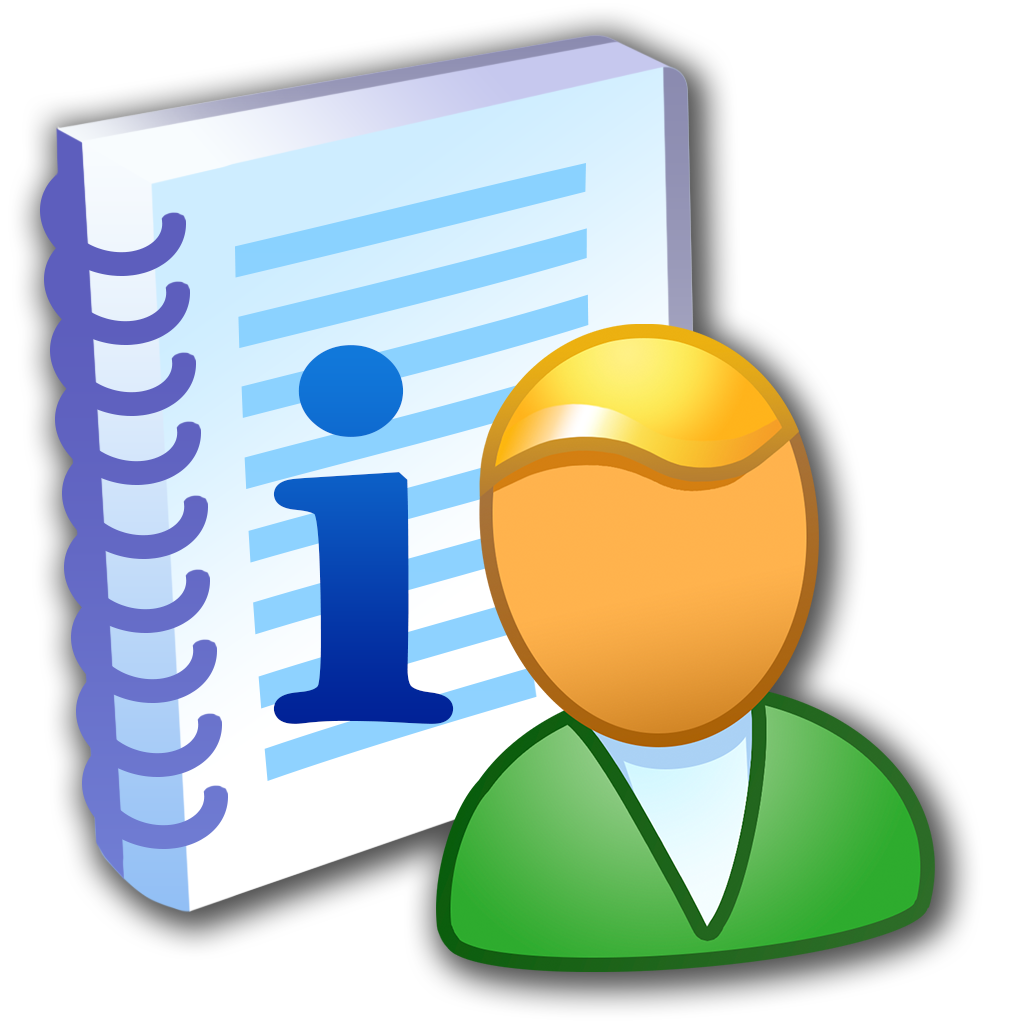
<style>
.page{position:relative;width:1024px;height:1024px;background:#ffffff}
.page>*{position:absolute;margin:0}
.t1{font:541.1px "BellMTBold";letter-spacing:-0.025em;font-weight:bold;scale:1.16 1}
</style>
<div class="page">
<p class="t1" style="left:273px;top:345px;width:181px;height:379px">i</p>
</div>
